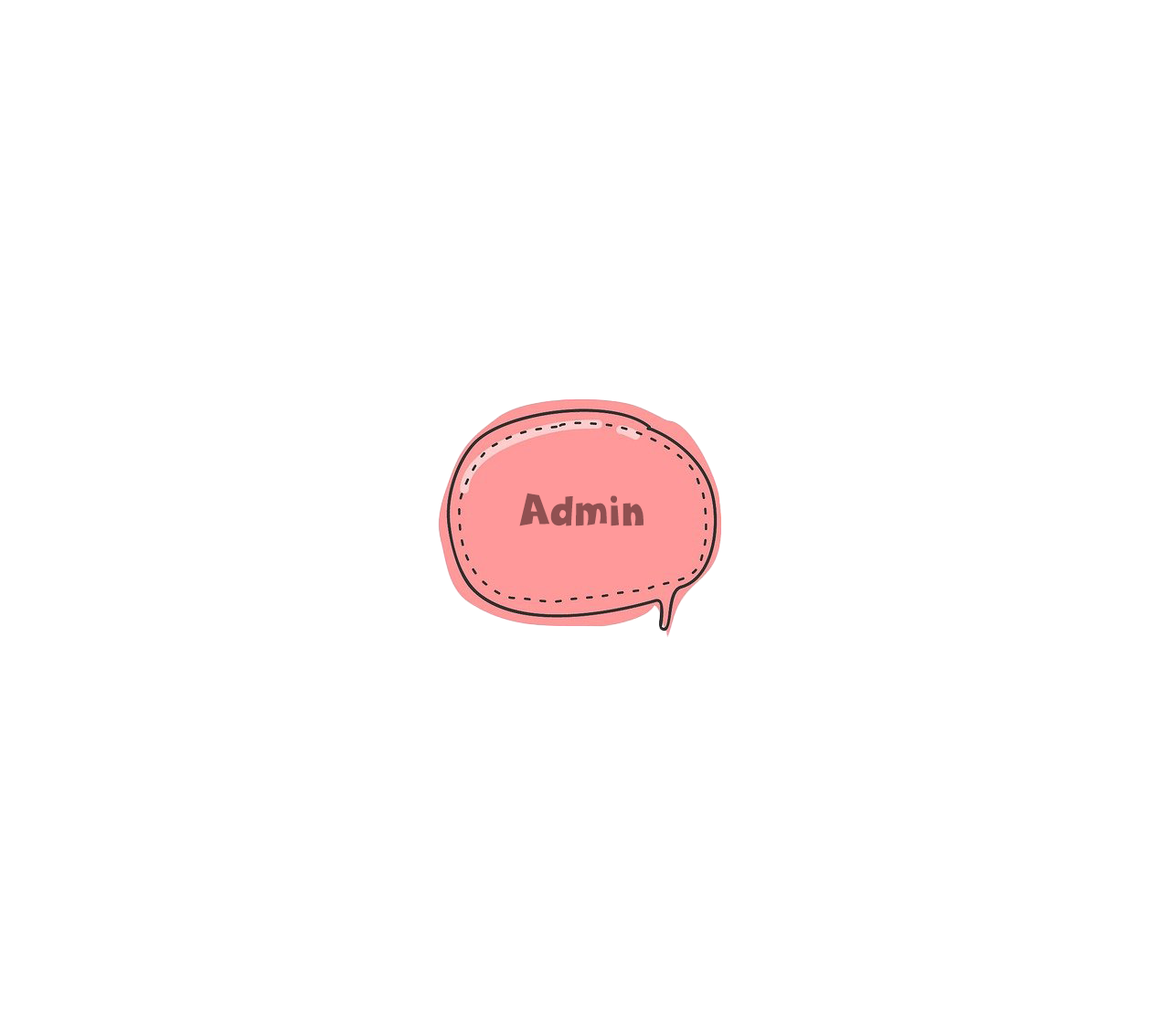
<style>
.page{position:relative;width:1170px;height:1019px;background:#ffffff}
.page>*{position:absolute;margin:0}
.t1{font:45.7px "ZubiloBlack";color:#905051}
</style>
<div class="page">
<p class="t1" style="left:519px;top:493px;width:124px;height:33px">Admin</p>
</div>
